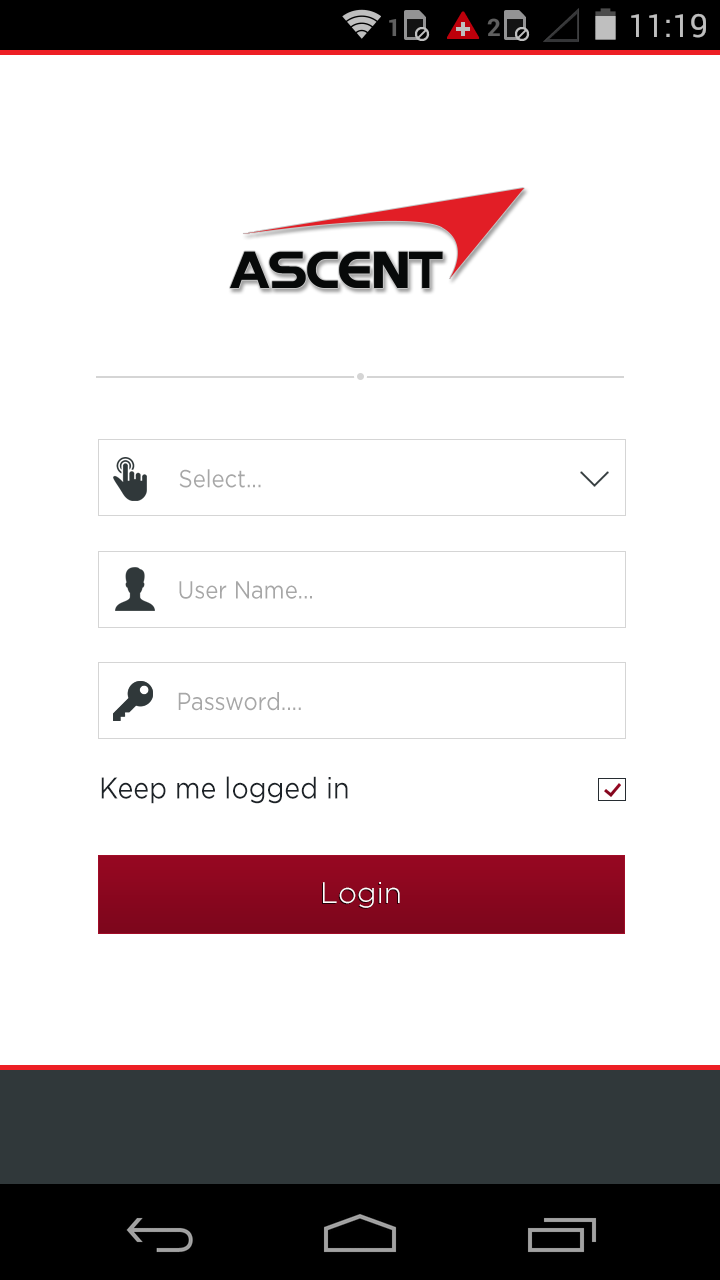
<style>
.page{position:relative;width:720px;height:1280px;background:#ffffff}
.page>*{position:absolute;margin:0}
.t1{font:24.6px "Gotham-Book";color:#a7a7a7;scale:0.89 1}
.t2{font:30px "Gotham-Book";color:#1c2227;scale:0.89 1}
.t3{font:29.5px "Gotham-Light";color:#ffffff}
</style>
<div class="page">
<p class="t1" style="left:179px;top:469px;width:82px;height:19px">Select...</p>
<p class="t1" style="left:179px;top:581px;width:133px;height:18px">User Name...</p>
<p class="t1" style="left:178px;top:692px;width:123px;height:19px">Password....</p>
<p class="t2" style="left:101px;top:776px;width:247px;height:28px">Keep me logged in</p>
<p class="t3" style="left:323px;top:882px;width:77px;height:26px">Login</p>
</div>
